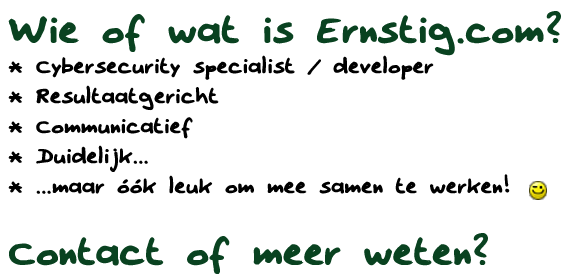
<style>
.page{position:relative;width:564px;height:280px;background:#ffffff}
.page>*{position:absolute;margin:0}
.t1{font:25px "Erno2002";color:#000000}
.t2{font:45px "Erno2002";color:#094220}
</style>
<div class="page">
<p class="t1" style="left:8px;top:11px;width:553px;height:263px"><span class="t2">Wie of wat is Ernstig.com?<br></span>* Cybersecurity specialist / developer<br>* Resultaatgericht<br>* Communicatief<br>* Duidelijk...<br>* ...maar óók leuk om mee samen te werken! <br>  <br><span class="t2">Contact of meer weten?</span></p>
</div>
